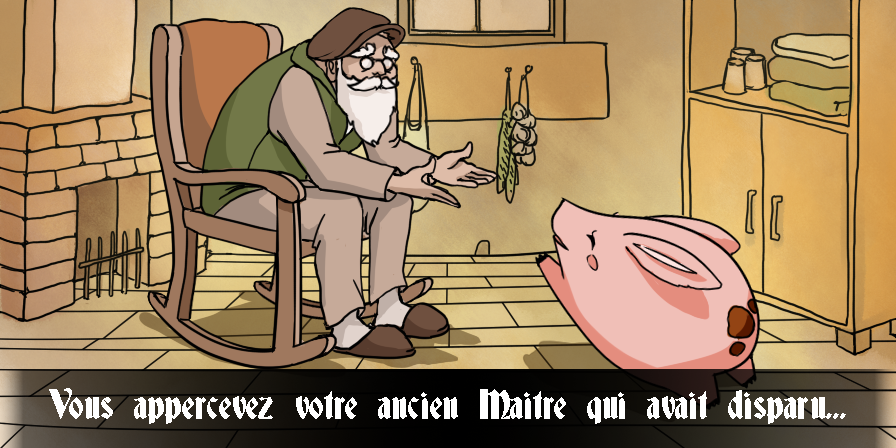
<style>
.page{position:relative;width:896px;height:448px}
.page>*{position:absolute;margin:0}
.t1{font:37.5px "Deutsch-Gothic";color:#ffffff}
</style>
<div class="page">
<p class="t1" style="left:49px;top:388px;width:797px;height:36px">Vous appercevez votre ancien Maitre qui avait disparu...</p>
</div>
